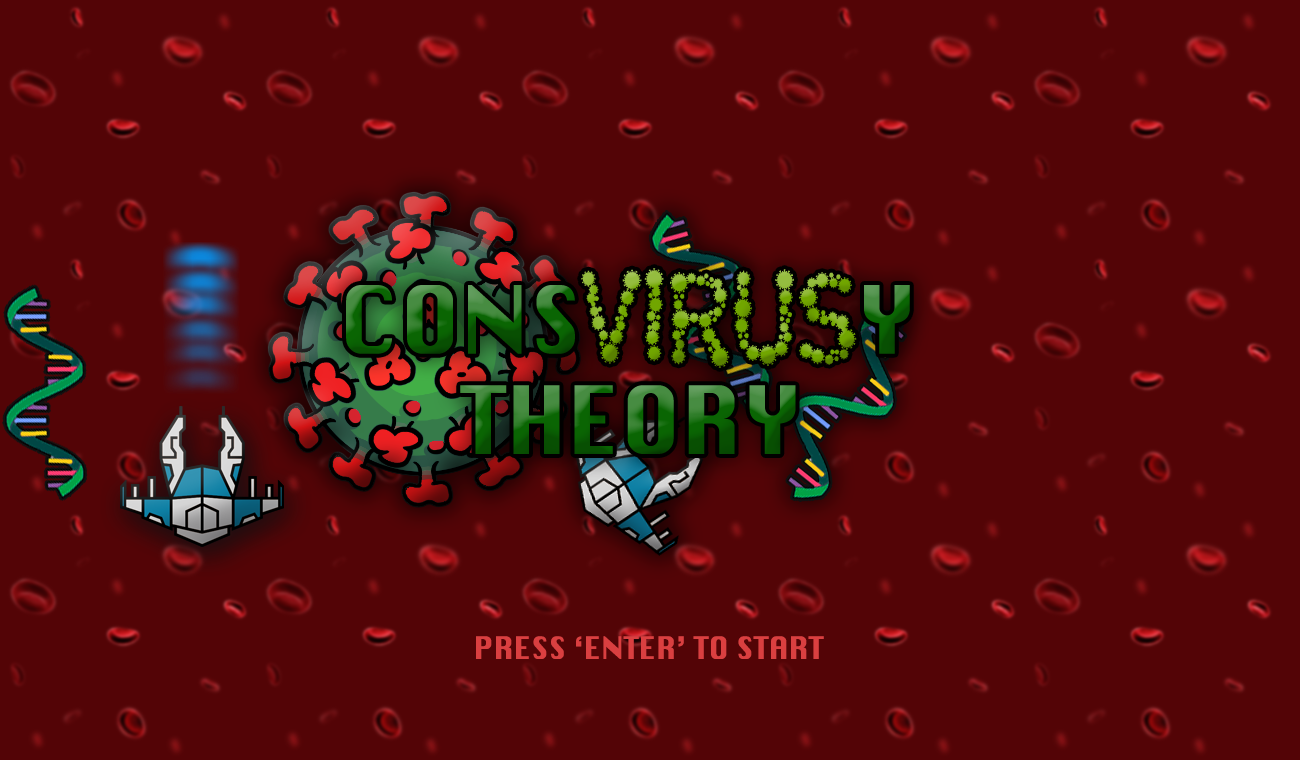
<style>
.page{position:relative;width:1300px;height:760px;background:#530406}
.page>*{position:absolute;margin:0}
.t1{font:128.1px "CoronaviralRegular";text-transform:uppercase;scale:0.88 1}
.t2{font:91.4px "Silom";text-transform:uppercase}
.t3{font:30px "Silom";color:#da3f40;text-transform:uppercase}
</style>
<div class="page">
<p class="t1" style="left:581px;top:268px;width:276px;height:100px">VIRUS</p>
<p class="t2" style="left:346px;top:285px;width:564px;height:69px">CONS            Y</p>
<p class="t2" style="left:460px;top:385px;width:336px;height:69px">THEORY</p>
<p class="t3" style="left:476px;top:636px;width:348px;height:23px">PRESS ‘ENTER’ to start</p>
</div>
